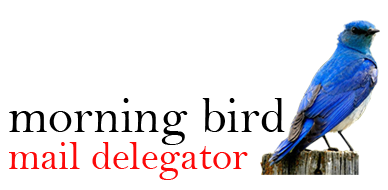
<style>
.page{position:relative;width:388px;height:190px;background:#ffffff}
.page>*{position:absolute;margin:0}
.t1{font:51.1px "BellMT";color:#000000}
.t2{font:41px "BellMT";color:#fc0909}
</style>
<div class="page">
<p class="t1" style="left:9px;top:98px;width:276px;height:47px">morning bird</p>
<p class="t2" style="left:9px;top:142px;width:239px;height:38px">mail delegator</p>
</div>
